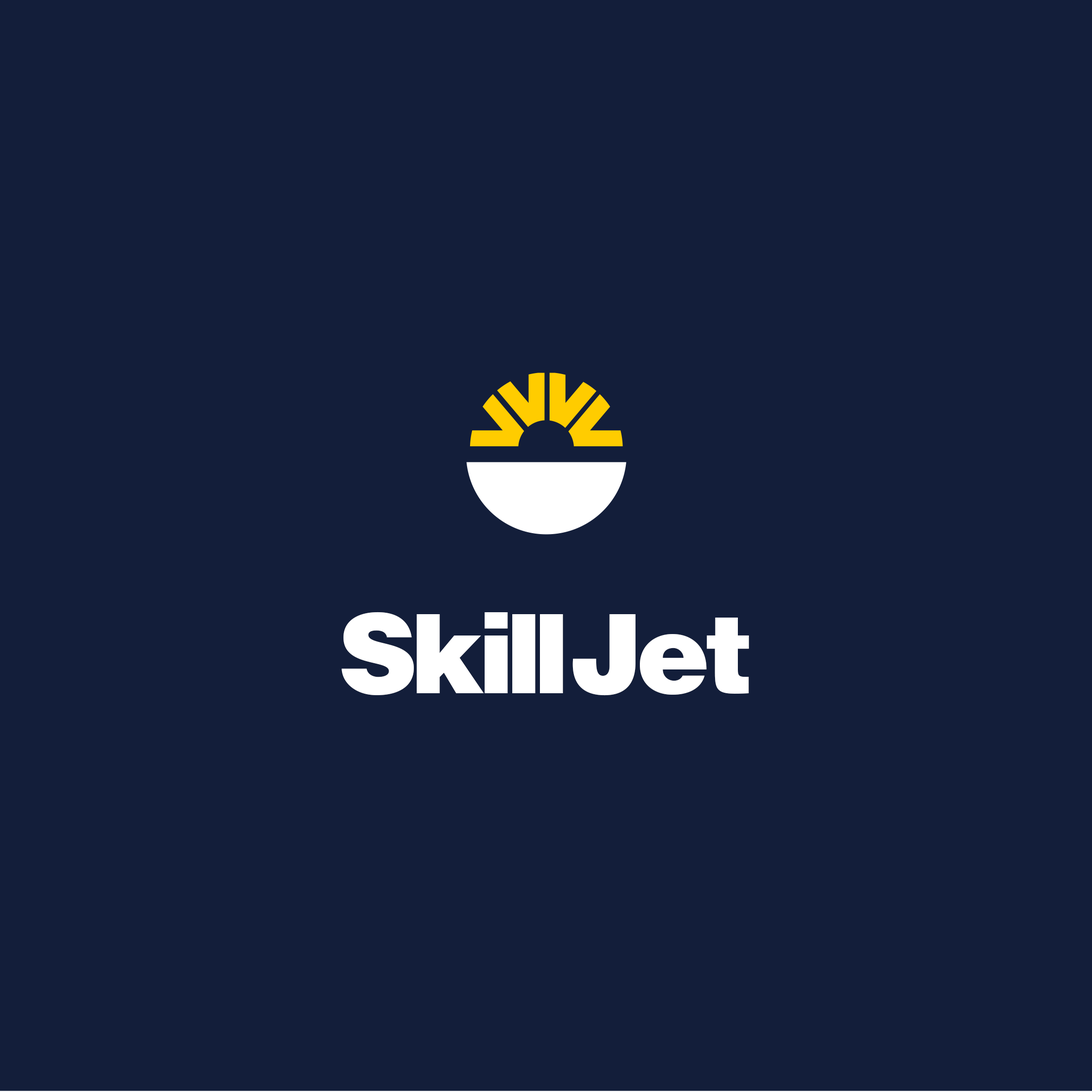
<style>
.page{position:relative;width:1092px;height:1092px;background:#131e3a}
.page>*{position:absolute;margin:0}
.t1{font:109.9px "Helvetica-Black";color:#ffffff}
</style>
<div class="page">
<p class="t1" style="left:342px;top:612px;width:407px;height:84px">SkillJet</p>
</div>
